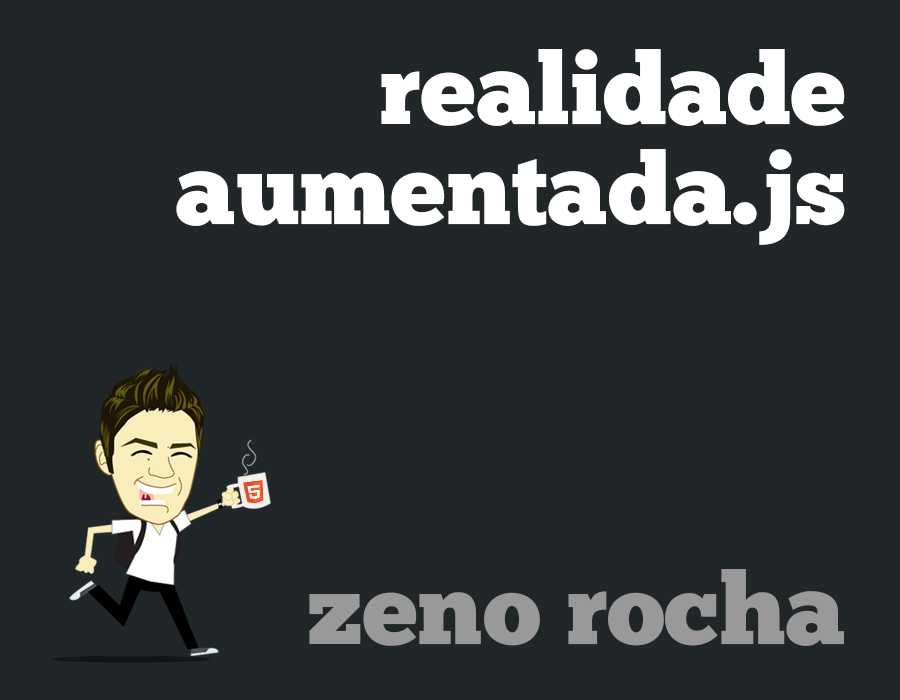
<style>
.page{position:relative;width:900px;height:700px;background:#212629}
.page>*{position:absolute;margin:0}
.t1{font:99.9px/99.9px "ChunkFive-Roman";color:#ffffff}
.t2{font:99.9px "ChunkFive-Roman";color:#999999}
</style>
<div class="page">
<p class="t1" style="left:176px;top:49px;width:669px;height:196px;text-align:right">realidade<br>aumentada.js</p>
<p class="t2" style="left:309px;top:569px;width:535px;height:77px">zeno rocha</p>
</div>
